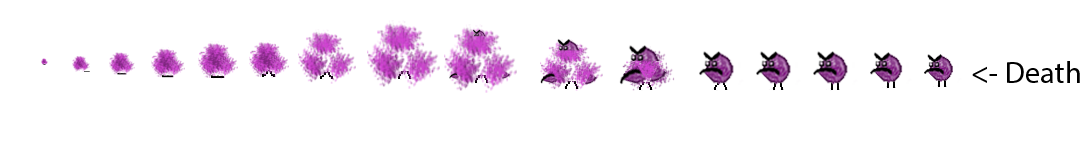
<style>
.page{position:relative;width:1080px;height:144px;background:#ffffff}
.page>*{position:absolute;margin:0}
.t1{font:12px "MyriadPro-Regular";color:#000000}
</style>
<div class="page">
<p class="t1" style="left:972px;top:61px;width:108px;height:22px">&lt;- Death</p>
</div>
